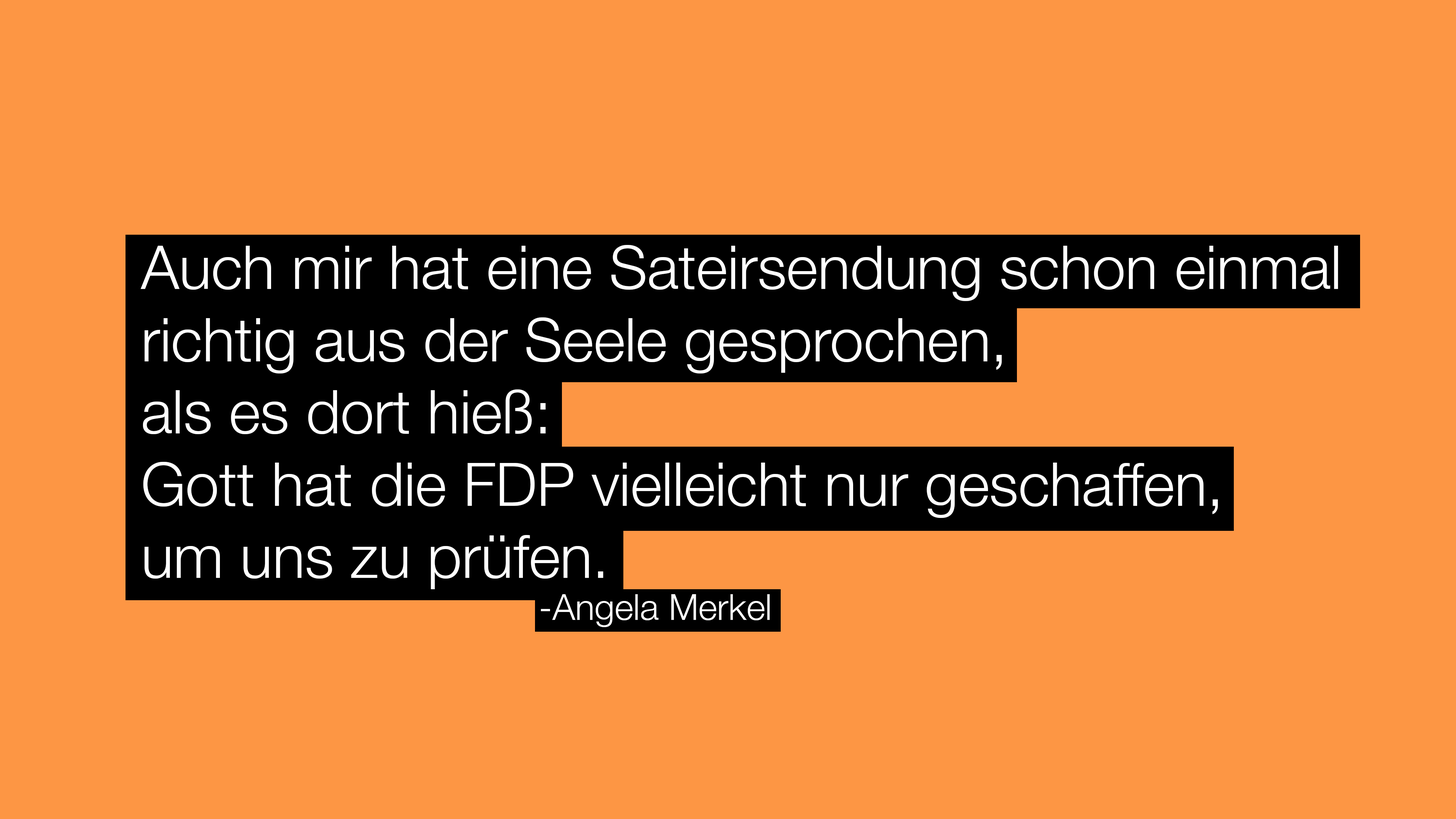
<style>
.page{position:relative;width:1456px;height:819px;background:#fd9644}
.page>*{position:absolute;margin:0}
.t1{font:60.2px "HelveticaNeue-Light";color:#ffffff}
.t2{font:36.1px "HelveticaNeue-Light";color:#ffffff}
</style>
<div class="page">
<p class="t1" style="left:141px;top:245px;width:1197px;height:344px">Auch mir hat eine Sateirsendung schon einmal <br>richtig aus der Seele gesprochen, <br>als es dort hieß: <br>Gott hat die FDP vielleicht nur geschaffen, <br>um uns zu prüfen.</p>
<p class="t2" style="left:541px;top:594px;width:229px;height:33px">-Angela Merkel</p>
</div>
